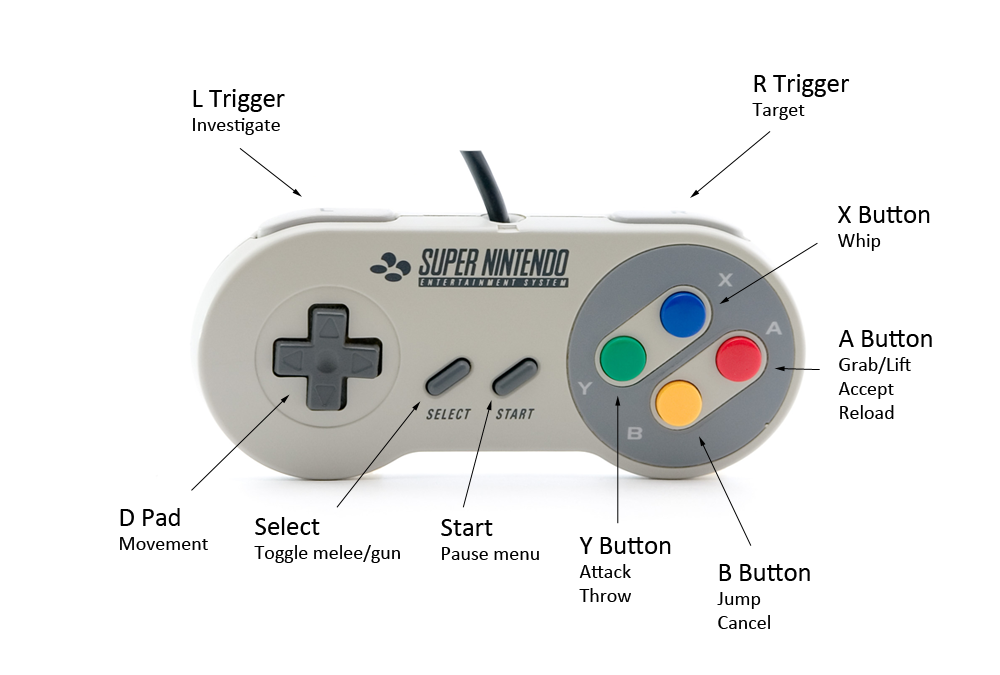
<style>
.page{position:relative;width:1000px;height:675px;background:#ffffff}
.page>*{position:absolute;margin:0}
.t1{font:26.7px "Calibri";color:#000000}
.t2{font:20px "Calibri";color:#000000}
</style>
<div class="page">
<p class="t1" style="left:752px;top:74px;width:98px;height:46px">R Trigger<br><span class="t2">Target</span></p>
<p class="t2" style="left:193px;top:89px;width:92px;height:46px"><span class="t1">L Trigger<br></span>Investigate</p>
<p class="t1" style="left:838px;top:206px;width:92px;height:45px">X Button<br><span class="t2">Whip</span></p>
<p class="t2" style="left:838px;top:330px;width:94px;height:89px"><span class="t1">A Button<br></span>Grab/Lift<br>Accept<br>Reload</p>
<p class="t2" style="left:120px;top:508px;width:88px;height:42px"><span class="t1">D Pad<br></span>Movement</p>
<p class="t2" style="left:254px;top:517px;width:146px;height:46px"><span class="t1">Select<br></span>Toggle melee/gun</p>
<p class="t2" style="left:441px;top:519px;width:98px;height:41px"><span class="t1">Start<br></span>Pause menu</p>
<p class="t2" style="left:579px;top:537px;width:92px;height:65px"><span class="t1">Y Button<br></span>Attack<br>Throw</p>
<p class="t2" style="left:717px;top:564px;width:93px;height:65px"><span class="t1">B Button<br></span>Jump<br>Cancel</p>
</div>
